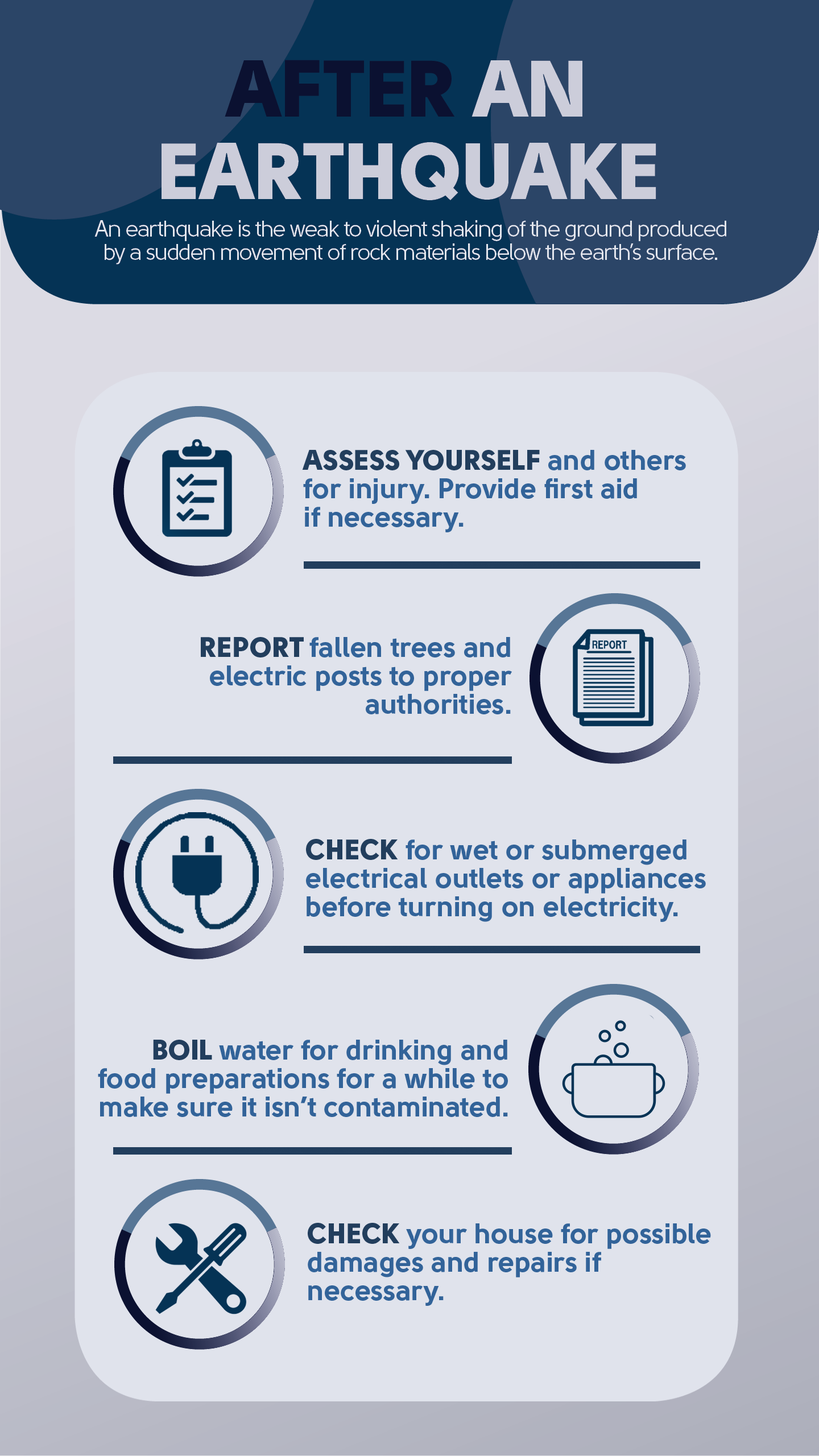
<style>
.page{position:relative;width:819px;height:1456px;background:#e0e3ec}
.page>*{position:absolute;margin:0}
.t1{font:28.4px/28.4px "Solomon-Sans-Bold";color:#326399}
.t2{font:28.4px/28.4px "Solomon-Sans-Black";color:#223e5d}
</style>
<div class="page">
<p class="t1" style="left:302px;top:450px;width:384px;height:82px"><span class="t2">ASSESS YOURSELF </span>and others<br>for injury. Provide first aid<br>if necessary.</p>
<p class="t1" style="left:201px;top:637px;width:311px;height:77px;text-align:right"><span class="t2">REPORT </span>fallen trees and<br>electric posts to proper<br>authorities.</p>
<p class="t1" style="left:306px;top:839px;width:400px;height:83px"><span class="t2">CHECK </span>for wet or submerged<br>electrical outlets or appliances<br>before turning on electricity.</p>
<p class="t1" style="left:98px;top:1040px;width:410px;height:77px;text-align:right"><span class="t2">BOIL </span>water for drinking and<br>food preparations for a while to<br>make sure it isn’t contaminated.</p>
<p class="t1" style="left:308px;top:1223px;width:403px;height:83px"><span class="t2">CHECK </span>your house for possible<br>damages and repairs if<br>necessary.</p>
</div>
